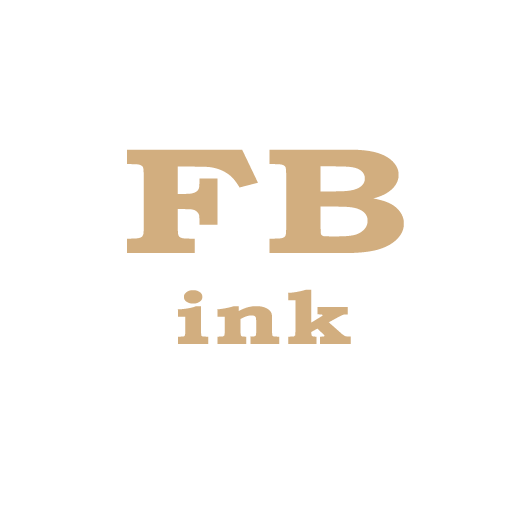
<style>
.page{position:relative;width:512px;height:512px;background:#ffffff}
.page>*{position:absolute;margin:0}
.t1{font:75.8px "BookmanOldStyle-Bold";letter-spacing:0.02em;color:#d2ae7f;scale:1.34 1}
.t2{font:151.7px "BookmanOldStyle-Bold";letter-spacing:0.02em;color:#d2ae7f;scale:1.34 1}
</style>
<div class="page">
<p class="t1" style="left:127px;top:149px;width:277px;height:195px;text-align:center"><span class="t2">FB<br></span>ink</p>
</div>
